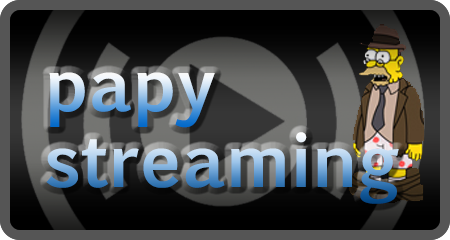
<style>
.page{position:relative;width:450px;height:240px}
.page>*{position:absolute;margin:0}
.t1{font:72px "EuphemiaUCAS-Bold"}
</style>
<div class="page">
<p class="t1" style="left:49px;top:72px;width:166px;height:56px">papy</p>
<p class="t1" style="left:46px;top:132px;width:353px;height:72px">streaming</p>
</div>
